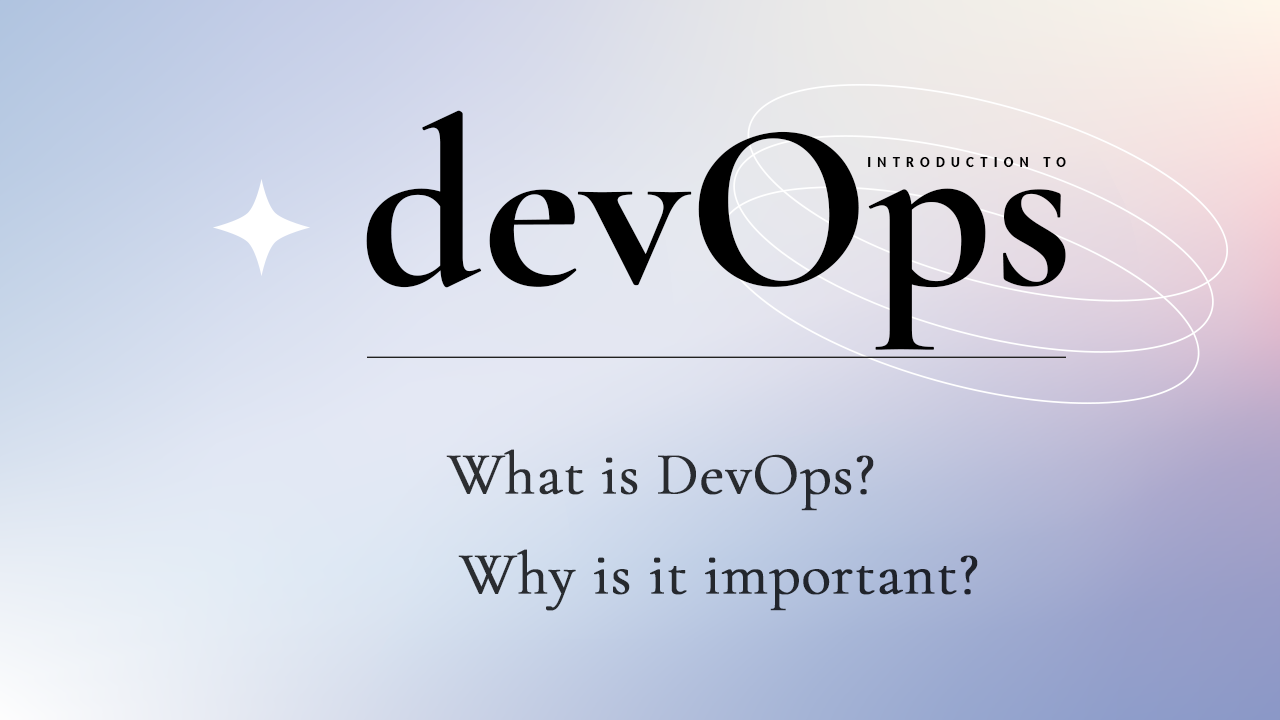
<style>
.page{position:relative;width:1280px;height:720px}
.page>*{position:absolute;margin:0}
.t1{font:239.1px "CormorantGaramond-Bold";color:#000000}
.t2{font:15.2px "Lato-Black";letter-spacing:0.48em;color:#000000;text-transform:uppercase;scale:0.82 1}
.t3{font:60px "CormorantGaramond-Light";color:#292b2f;font-weight:bold}
.t4{font:60px "CormorantGaramond-Light";color:#24272d;font-weight:bold}
</style>
<div class="page">
<p class="t1" style="left:366px;top:110px;width:700px;height:240px">devOps</p>
<p class="t2" style="left:868px;top:157px;width:198px;height:10px">Introduction to</p>
<p class="t3" style="left:446px;top:449px;width:428px;height:62px">What is DevOps?</p>
<p class="t4" style="left:458px;top:549px;width:520px;height:62px">Why is it important?</p>
</div>
